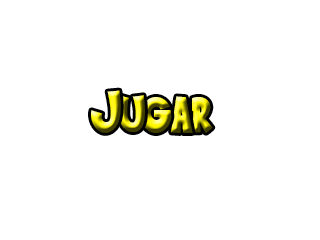
<style>
.page{position:relative;width:320px;height:240px;background:#ffffff}
.page>*{position:absolute;margin:0}
.t1{font:60px "SaiyanSans"}
</style>
<div class="page">
<p class="t1" style="left:91px;top:90px;width:30px;height:43px">J</p>
<p class="t1" style="left:118px;top:95px;width:27px;height:37px">u</p>
<p class="t1" style="left:141px;top:97px;width:31px;height:36px">g</p>
<p class="t1" style="left:171px;top:96px;width:22px;height:37px">a</p>
<p class="t1" style="left:192px;top:97px;width:21px;height:36px">r</p>
</div>
